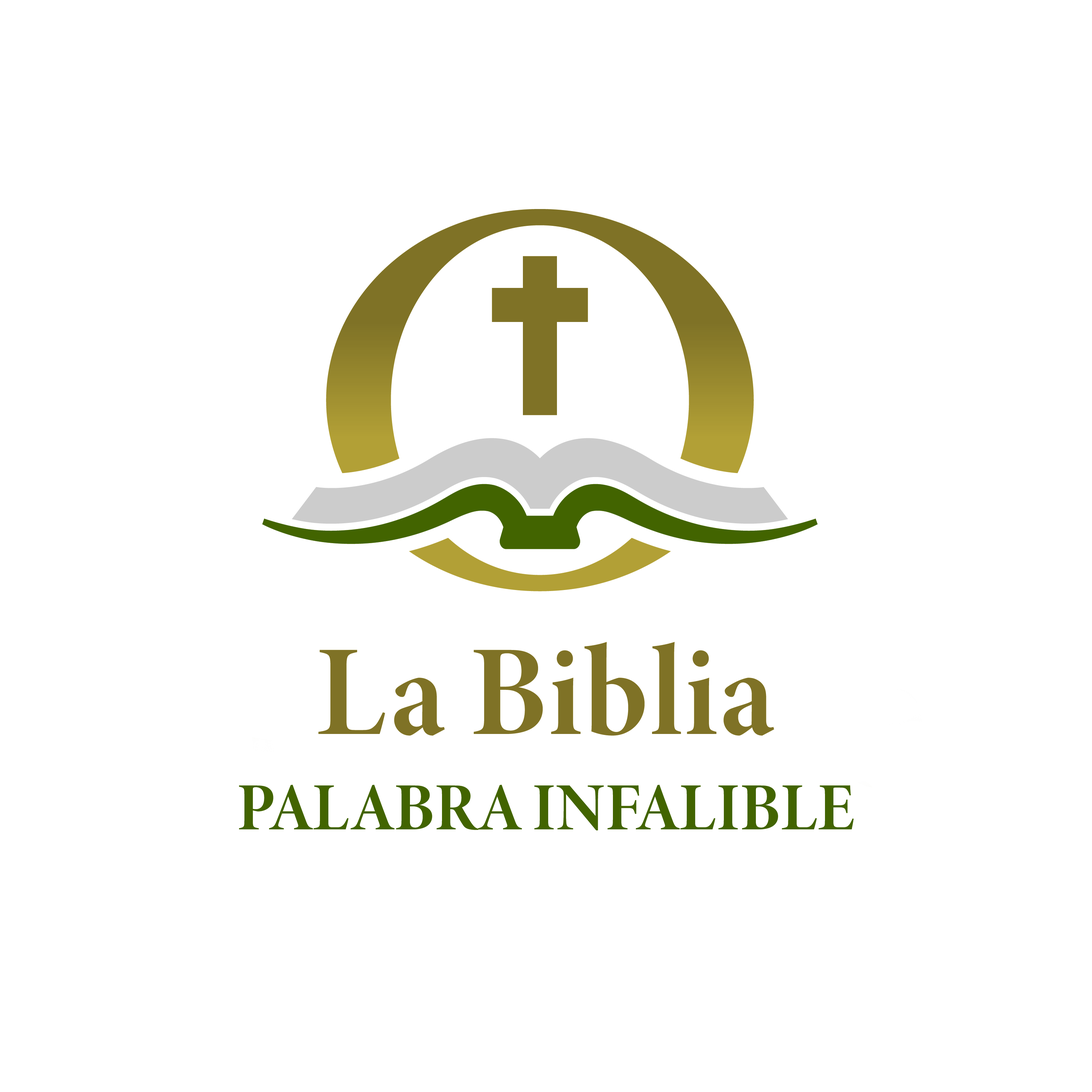
<style>
.page{position:relative;width:1092px;height:1092px;background:#ffffff}
.page>*{position:absolute;margin:0}
.t1{font:129.2px "MinionConceptRoman-DisplayBold";letter-spacing:0.005em;color:#7f7226;font-style:italic}
.t2{font:67.4px "MinionConceptRoman-DisplayBold";letter-spacing:0.005em;color:#426400;font-style:italic}
</style>
<div class="page">
<p class="t1" style="left:318px;top:642px;width:456px;height:94px">La Biblia</p>
<p class="t2" style="left:239px;top:785px;width:615px;height:45px">PALABRA INFALIBLE</p>
</div>
